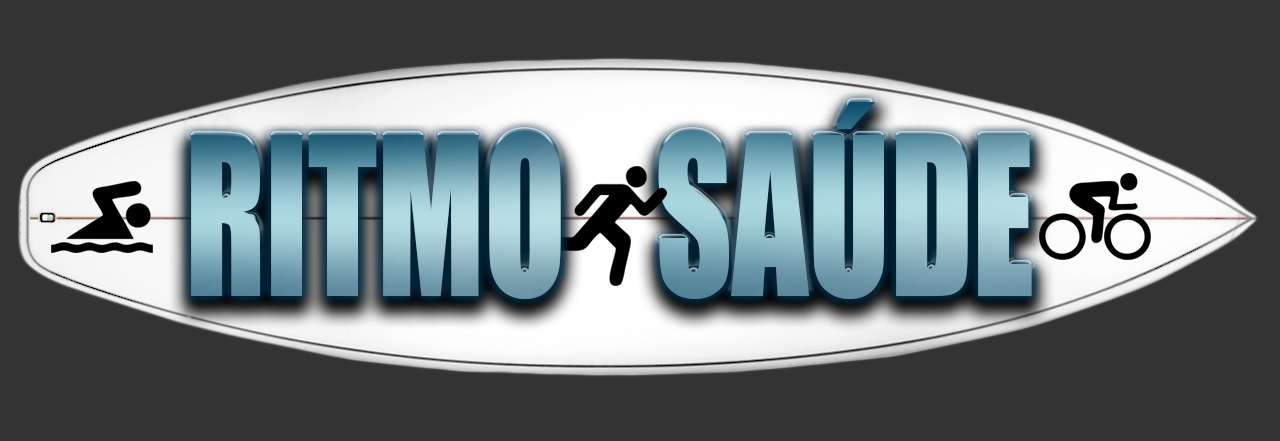
<style>
.page{position:relative;width:1280px;height:441px;background:#333333}
.page>*{position:absolute;margin:0}
.t1{font:204.2px "Impact";scale:0.73 1}
</style>
<div class="page">
<p class="t1" style="left:658px;top:102px;width:374px;height:197px">SAÚDE</p>
<p class="t1" style="left:191px;top:131px;width:370px;height:168px">RITMO</p>
</div>
